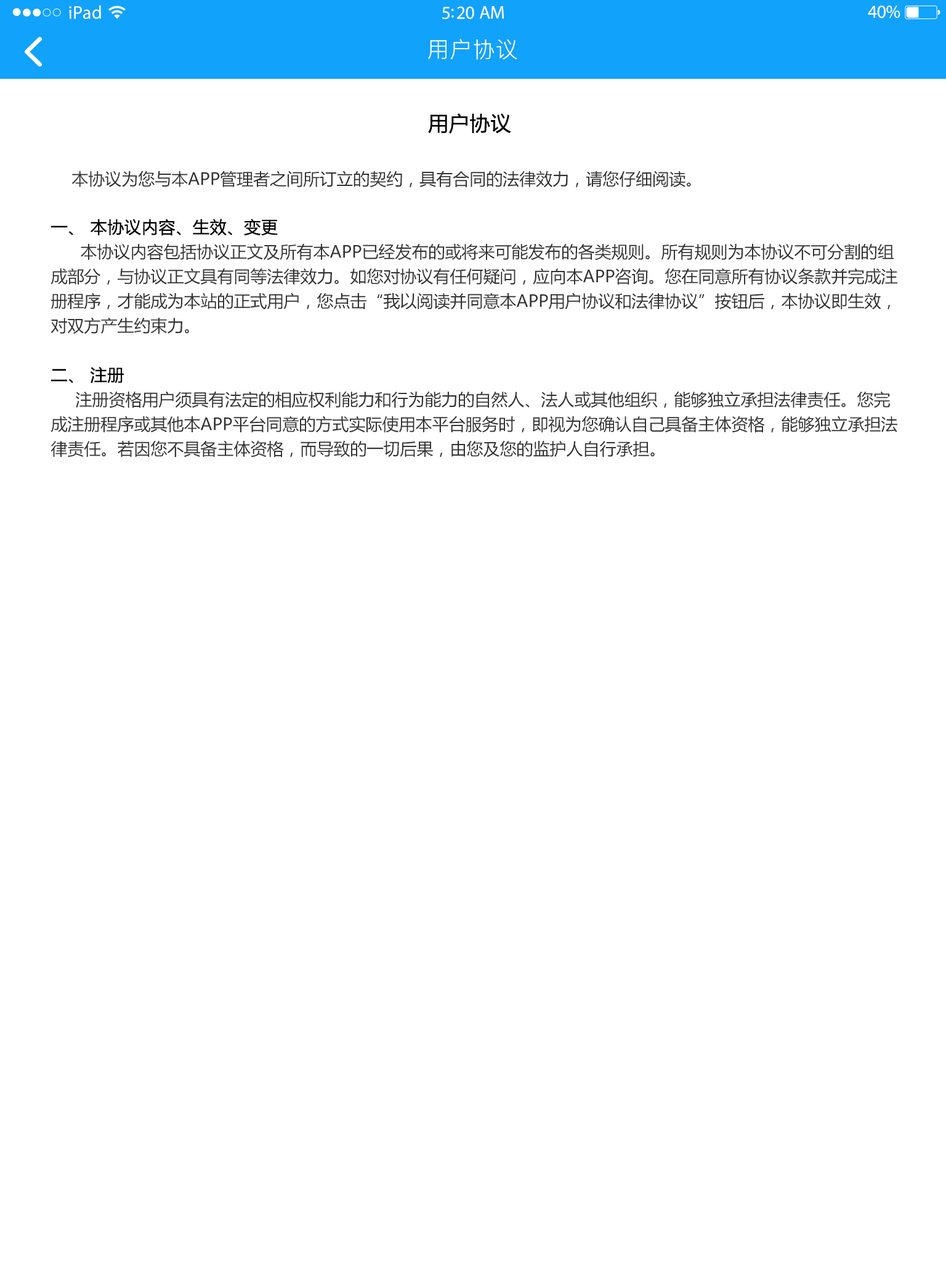
<style>
.page{position:relative;width:946px;height:1261px;background:#ffffff}
.page>*{position:absolute;margin:0}
.t1{font:18.5px "MyriadPro-Regular";letter-spacing:0.02em;color:#ffffff}
.t2{font:18.5px "MyriadPro-Regular";letter-spacing:-0.02em;color:#ffffff}
.t3{font:22.2px "PingFang-SC-Regular";letter-spacing:0.03em;color:#ffffff}
.t4{font:20.3px "MicrosoftYaHei";color:#000000;font-weight:bold}
.t5{font:16.6px/24.6px "MicrosoftYaHei";color:#333333}
.t6{font:17.9px/24.6px "MicrosoftYaHei";color:#333333}
.t7{font:16.6px/24.6px "MicrosoftYaHei";color:#000000;font-weight:bold}
</style>
<div class="page">
<p class="t1" style="left:69px;top:5px;width:32px;height:14px">iPad</p>
<p class="t2" style="left:867px;top:6px;width:33px;height:12px">40%</p>
<p class="t2" style="left:442px;top:6px;width:62px;height:13px">5:20 AM</p>
<p class="t3" style="left:428px;top:39px;width:89px;height:21px">用户协议</p>
<p class="t4" style="left:428px;top:113px;width:83px;height:21px">用户协议</p>
<p class="t5" style="left:50px;top:171px;width:847px;height:286px"><span class="t6">   </span> 本协议为您与本APP管理者之间所订立的契约，具有合同的法律效力，请您仔细阅读。<br><br><span class="t7">一、 本协议内容、生效、变更  <br></span>      本协议内容包括协议正文及所有本APP已经发布的或将来可能发布的各类规则。所有规则为本协议不可分割的组成部分，与协议正文具有同等法律效力。如您对协议有任何疑问，应向本APP咨询。您在同意所有协议条款并完成注册程序，才能成为本站的正式用户，您点击“我以阅读并同意本APP用户协议和法律协议”按钮后，本协议即生效，对双方产生约束力。<br><br><span class="t7">二、 注册 </span> <br>     注册资格用户须具有法定的相应权利能力和行为能力的自然人、法人或其他组织，能够独立承担法律责任。您完成注册程序或其他本APP平台同意的方式实际使用本平台服务时，即视为您确认自己具备主体资格，能够独立承担法律责任。若因您不具备主体资格，而导致的一切后果，由您及您的监护人自行承担。</p>
</div>
